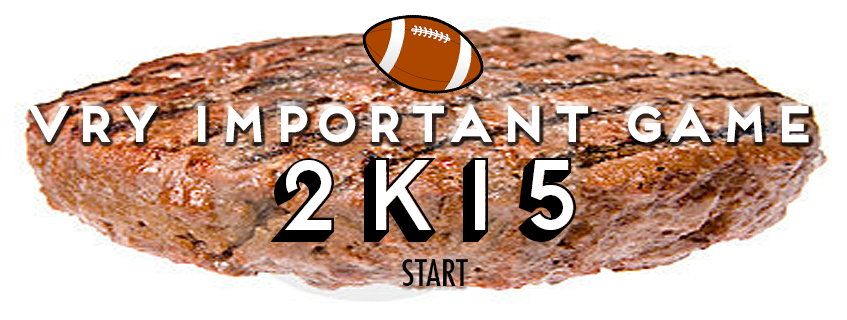
<style>
.page{position:relative;width:847px;height:320px;background:#ffffff}
.page>*{position:absolute;margin:0}
.t1{font:48px "Frontage-Bold";color:#ffffff}
.t2{font:100px "Frontage-3D";color:#000000}
.t3{font:100px "Frontage-Regular";color:#ffffff}
.t4{font:36px "Futura-CondensedMedium";color:#000000}
</style>
<div class="page">
<p class="t1" style="left:28px;top:104px;width:781px;height:39px">VRY IMPORTANT GAME</p>
<p class="t2" style="left:270px;top:158px;width:306px;height:84px">2K15</p>
<p class="t3" style="left:285px;top:160px;width:288px;height:70px">2K15</p>
<p class="t4" style="left:402px;top:259px;width:66px;height:27px">START</p>
</div>
